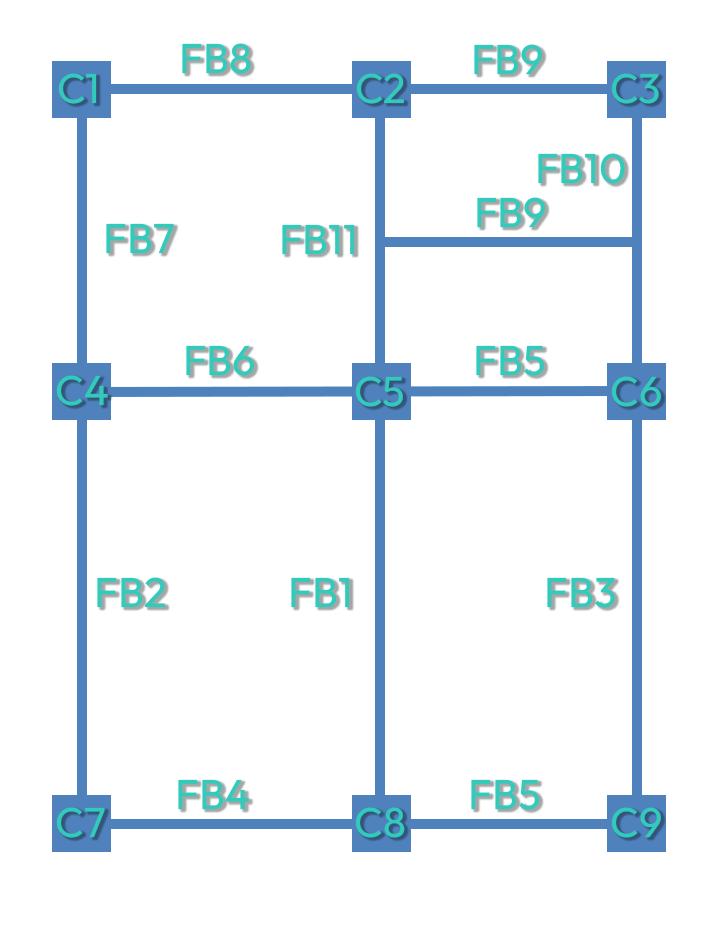
<style>
.page{position:relative;width:718px;height:928px;background:#ffffff}
.page>*{position:absolute;margin:0}
.t1{font:41.7px "Outfit-Regular";color:#33cabb}
</style>
<div class="page">
<p class="t1" style="left:182px;top:43px;width:69px;height:31px">FB8</p>
<p class="t1" style="left:474px;top:44px;width:68px;height:31px">FB9</p>
<p class="t1" style="left:58px;top:73px;width:39px;height:31px">C1</p>
<p class="t1" style="left:356px;top:73px;width:48px;height:31px">C2</p>
<p class="t1" style="left:611px;top:73px;width:48px;height:31px">C3</p>
<p class="t1" style="left:538px;top:153px;width:87px;height:31px">FB10</p>
<p class="t1" style="left:477px;top:197px;width:68px;height:31px">FB9</p>
<p class="t1" style="left:106px;top:223px;width:68px;height:31px">FB7</p>
<p class="t1" style="left:282px;top:224px;width:73px;height:31px">FB11</p>
<p class="t1" style="left:186px;top:345px;width:68px;height:31px">FB6</p>
<p class="t1" style="left:476px;top:345px;width:68px;height:31px">FB5</p>
<p class="t1" style="left:56px;top:375px;width:52px;height:31px">C4</p>
<p class="t1" style="left:355px;top:376px;width:48px;height:31px">C5</p>
<p class="t1" style="left:611px;top:376px;width:50px;height:31px">C6</p>
<p class="t1" style="left:97px;top:577px;width:68px;height:31px">FB2</p>
<p class="t1" style="left:291px;top:577px;width:59px;height:31px">FB1</p>
<p class="t1" style="left:547px;top:577px;width:68px;height:31px">FB3</p>
<p class="t1" style="left:178px;top:779px;width:71px;height:31px">FB4</p>
<p class="t1" style="left:471px;top:779px;width:68px;height:31px">FB5</p>
<p class="t1" style="left:56px;top:807px;width:49px;height:31px">C7</p>
<p class="t1" style="left:355px;top:807px;width:50px;height:31px">C8</p>
<p class="t1" style="left:611px;top:807px;width:50px;height:31px">C9</p>
</div>
